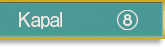
<style>
.page{position:relative;width:165px;height:47px;background:#4b9996}
.page>*{position:absolute;margin:0}
.t1{font:18px "GothicMB101Pro-Regular";letter-spacing:-0.04em;color:#f2ebe5;scale:0.9 1}
</style>
<div class="page">
<p class="t1" style="left:19px;top:12px;width:43px;height:17px">Kapal</p>
</div>
